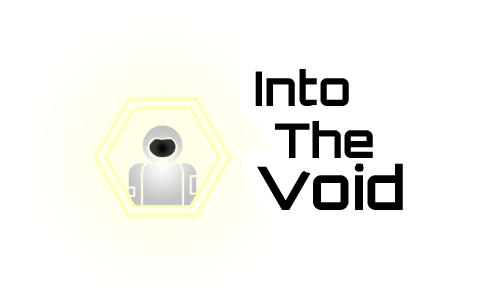
<style>
.page{position:relative;width:500px;height:300px;background:#ffffff}
.page>*{position:absolute;margin:0}
.t1{font:48px "Orbitron-Bold";color:#000000}
.t2{font:60px "Orbitron-Bold";color:#000000}
</style>
<div class="page">
<p class="t1" style="left:255px;top:69px;width:94px;height:37px">Into</p>
<p class="t1" style="left:275px;top:121px;width:98px;height:37px">The</p>
<p class="t2" style="left:257px;top:163px;width:146px;height:47px">Void</p>
</div>
